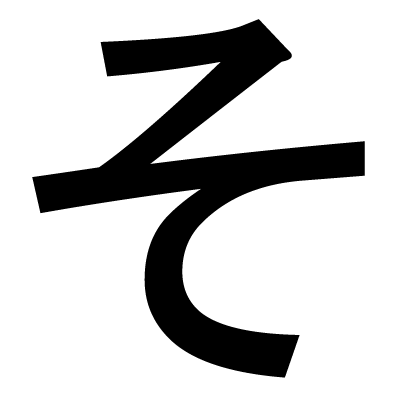
<style>
.page{position:relative;width:400px;height:400px;background:#ffffff}
.page>*{position:absolute;margin:0}
.t1{font:416.7px "MS-PGothic";color:#000000}
</style>
<div class="page">
<p class="t1" style="left:32px;top:19px;width:333px;height:359px">そ</p>
</div>
